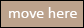
<style>
.page{position:relative;width:84px;height:28px;background:#bca28c}
.page>*{position:absolute;margin:0}
.t1{font:16px "Calibri";color:#ffffff}
</style>
<div class="page">
<p class="t1" style="left:9px;top:7px;width:68px;height:11px">move here</p>
</div>
